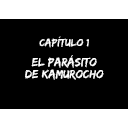
<style>
.page{position:relative;width:128px;height:128px;background:#000000}
.page>*{position:absolute;margin:0}
.t1{font:10.7px "EdoSZ";color:#ffffff;scale:1.05 1}
.t2{font:12.3px/11.8px "EdoSZ";color:#ffffff}
</style>
<div class="page">
<p class="t1" style="left:39px;top:36px;width:50px;height:12px">Capítulo 1</p>
<p class="t2" style="left:25px;top:55px;width:79px;height:25px;text-align:center">El parásito<br>de Kamurocho</p>
</div>
